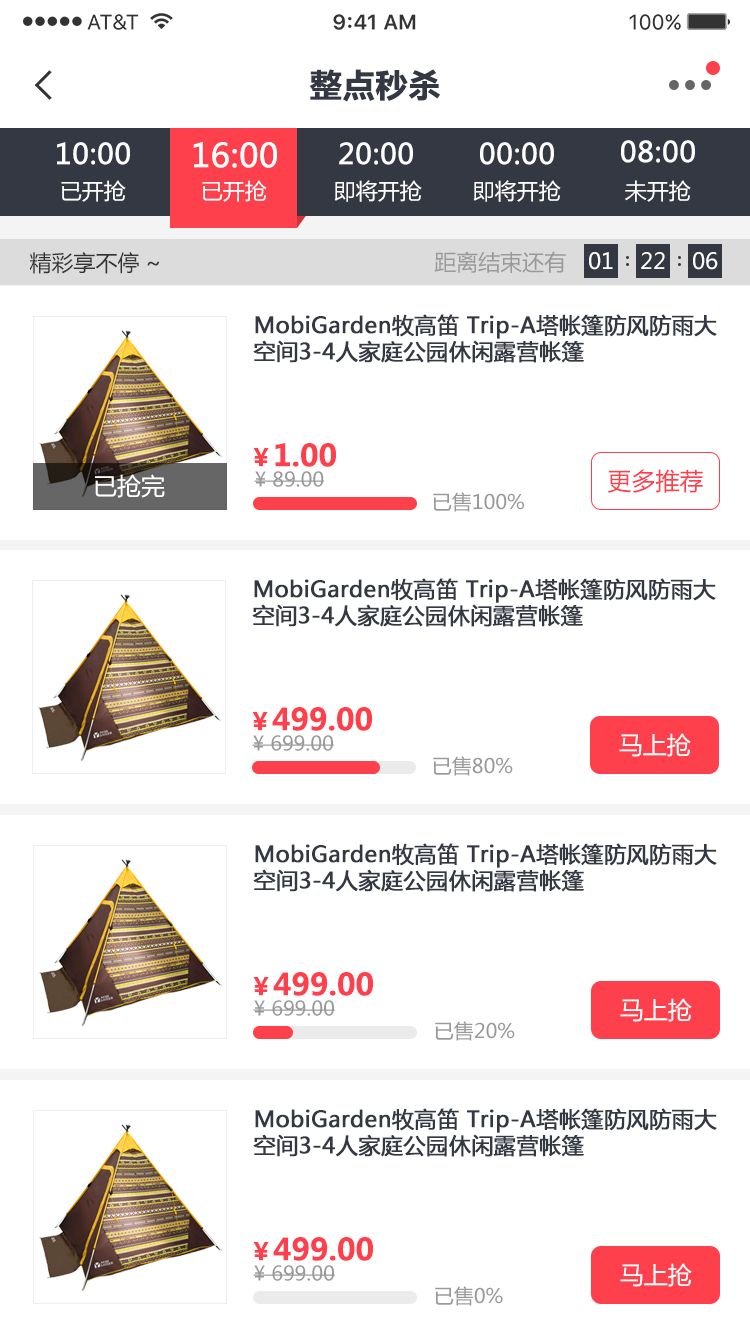
<style>
.page{position:relative;width:750px;height:1334px;background:#ffffff}
.page>*{position:absolute;margin:0}
.t1{font:32px "MicrosoftYaHei-Bold";color:#343843;font-weight:bold}
.t2{font:28px "MicrosoftYaHei";color:#ffffff;font-weight:bold}
.t3{font:32px "MicrosoftYaHei";color:#ffffff;font-weight:bold}
.t4{font:22px "MicrosoftYaHei";color:#ffffff}
.t5{font:22px "MicrosoftYaHei";color:#333333}
.t6{font:22px "MicrosoftYaHei";color:#999999}
.t7{font:22px "MicrosoftYaHei";color:#343843;font-weight:bold}
.t8{font:30px "MicrosoftYaHei-Bold";color:#fe404c}
.t9{font:24px "MicrosoftYaHei-Bold";color:#fe404c}
.t10{font:20px "MicrosoftYaHei";color:#999999}
.t11{font:24px "MicrosoftYaHei";color:#fe404c}
.t12{font:24px "MicrosoftYaHei";color:#ffffff}
</style>
<div class="page">
<p class="t1" style="left:309px;top:69px;width:131px;height:33px">整点秒杀</p>
<p class="t2" style="left:57px;top:142px;width:73px;height:23px">10:00</p>
<p class="t3" style="left:193px;top:142px;width:84px;height:26px">16:00</p>
<p class="t2" style="left:339px;top:142px;width:74px;height:23px">20:00</p>
<p class="t2" style="left:480px;top:142px;width:74px;height:23px">00:00</p>
<p class="t2" style="left:621px;top:140px;width:74px;height:23px">08:00</p>
<p class="t4" style="left:61px;top:180px;width:65px;height:22px">已开抢</p>
<p class="t4" style="left:202px;top:180px;width:65px;height:22px">已开抢</p>
<p class="t4" style="left:334px;top:180px;width:88px;height:22px">即将开抢</p>
<p class="t4" style="left:473px;top:180px;width:88px;height:22px">即将开抢</p>
<p class="t4" style="left:625px;top:180px;width:66px;height:22px">未开抢</p>
<p class="t5" style="left:29px;top:252px;width:130px;height:22px">精彩享不停~</p>
<p class="t6" style="left:434px;top:251px;width:132px;height:22px">距离结束还有</p>
<p class="t4" style="left:589px;top:252px;width:24px;height:18px">01</p>
<p class="t4" style="left:641px;top:252px;width:24px;height:17px">22</p>
<p class="t4" style="left:693px;top:252px;width:25px;height:18px">06</p>
<p class="t7" style="left:253px;top:314px;width:464px;height:49px">MobiGarden牧高笛 Trip-A塔帐篷防风防雨大空间3-4人家庭公园休闲露营帐篷</p>
<p class="t8" style="left:253px;top:443px;width:83px;height:24px"><span class="t9">￥</span>1.00</p>
<p class="t10" style="left:254px;top:471px;width:70px;height:16px">¥ 89.00</p>
<p class="t11" style="left:607px;top:469px;width:96px;height:24px">更多推荐</p>
<p class="t12" style="left:95px;top:474px;width:70px;height:24px">已抢完</p>
<p class="t10" style="left:433px;top:492px;width:91px;height:20px">已售100%</p>
<p class="t7" style="left:252px;top:578px;width:464px;height:49px">MobiGarden牧高笛 Trip-A塔帐篷防风防雨大空间3-4人家庭公园休闲露营帐篷</p>
<p class="t8" style="left:252px;top:707px;width:120px;height:24px"><span class="t9">￥</span>499.00</p>
<p class="t10" style="left:252px;top:735px;width:82px;height:16px">¥ 699.00</p>
<p class="t12" style="left:619px;top:733px;width:72px;height:24px">马上抢</p>
<p class="t10" style="left:433px;top:756px;width:80px;height:20px">已售80%</p>
<p class="t7" style="left:253px;top:843px;width:464px;height:49px">MobiGarden牧高笛 Trip-A塔帐篷防风防雨大空间3-4人家庭公园休闲露营帐篷</p>
<p class="t8" style="left:253px;top:972px;width:120px;height:24px"><span class="t9">￥</span>499.00</p>
<p class="t10" style="left:253px;top:1000px;width:82px;height:16px">¥ 699.00</p>
<p class="t12" style="left:620px;top:998px;width:72px;height:24px">马上抢</p>
<p class="t10" style="left:435px;top:1021px;width:80px;height:20px">已售20%</p>
<p class="t7" style="left:253px;top:1108px;width:464px;height:49px">MobiGarden牧高笛 Trip-A塔帐篷防风防雨大空间3-4人家庭公园休闲露营帐篷</p>
<p class="t8" style="left:253px;top:1237px;width:120px;height:24px"><span class="t9">￥</span>499.00</p>
<p class="t10" style="left:253px;top:1265px;width:82px;height:16px">¥ 699.00</p>
<p class="t12" style="left:620px;top:1263px;width:72px;height:24px">马上抢</p>
<p class="t10" style="left:435px;top:1286px;width:68px;height:20px">已售0%</p>
</div>
